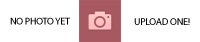
<style>
.page{position:relative;width:200px;height:42px;background:#ffffff}
.page>*{position:absolute;margin:0}
.t1{font:10px "MyriadPro-Regular";letter-spacing:-0.025em;color:#000000}
</style>
<div class="page">
<p class="t1" style="left:10px;top:17px;width:60px;height:8px">NO PHOTO YET</p>
<p class="t1" style="left:134px;top:18px;width:56px;height:7px">UPLOAD ONE!</p>
</div>
